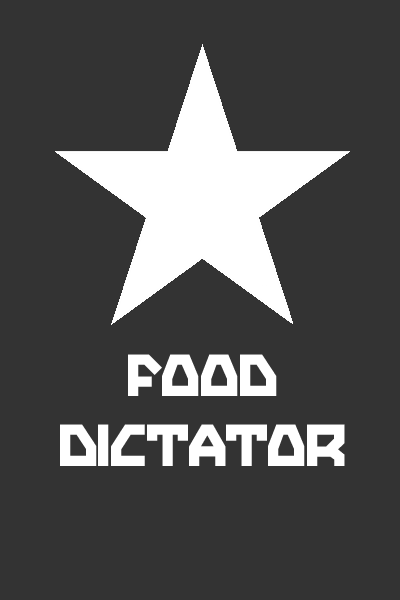
<style>
.page{position:relative;width:400px;height:600px;background:#333333}
.page>*{position:absolute;margin:0}
.t1{font:52px/14px "Dictator";letter-spacing:-0.025em;color:#ffffff}
</style>
<div class="page">
<p class="t1" style="left:60px;top:354px;width:285px;height:112px;text-align:center">Food<br><br><br><br><br>Dictator</p>
</div>
